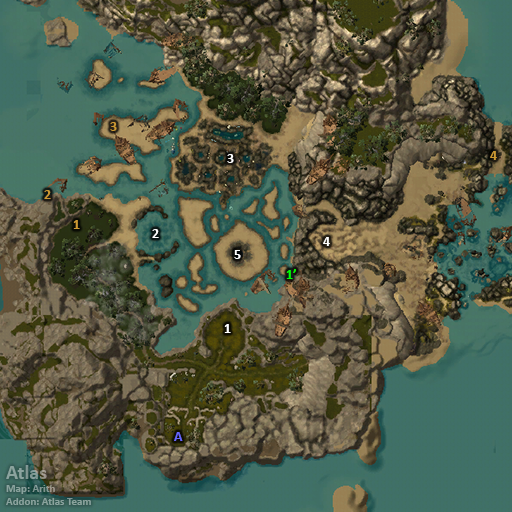
<style>
.page{position:relative;width:512px;height:512px}
.page>*{position:absolute;margin:0}
.t1{font:14px "Calibri-Bold";color:#cc9933}
.t2{font:14px "Calibri-Bold";color:#ffffff}
.t3{font:14px "Calibri-Bold";color:#00ff00}
.t4{font:14px "Calibri-Bold";color:#6666ff}
.t5{font:11px "Calibri-Bold";color:#8ba39d}
.t6{font:20px "Calibri-Bold";color:#8ba39d}
</style>
<div class="page">
<p class="t1" style="left:110px;top:122px;width:7px;height:9px">3</p>
<p class="t2" style="left:227px;top:154px;width:7px;height:9px">3</p>
<p class="t1" style="left:490px;top:151px;width:7px;height:9px">4</p>
<p class="t1" style="left:44px;top:190px;width:7px;height:9px">2</p>
<p class="t1" style="left:73px;top:220px;width:7px;height:9px">1</p>
<p class="t2" style="left:152px;top:229px;width:7px;height:9px">2</p>
<p class="t2" style="left:323px;top:237px;width:7px;height:9px">4</p>
<p class="t2" style="left:234px;top:250px;width:7px;height:9px">5</p>
<p class="t3" style="left:286px;top:269px;width:10px;height:10px">1’</p>
<p class="t2" style="left:224px;top:324px;width:7px;height:9px">1</p>
<p class="t4" style="left:174px;top:432px;width:9px;height:9px">A</p>
<p class="t5" style="left:6px;top:465px;width:85px;height:40px"><span class="t6">Atlas<br></span>Map: Arith<br>Addon: Atlas Team</p>
</div>
